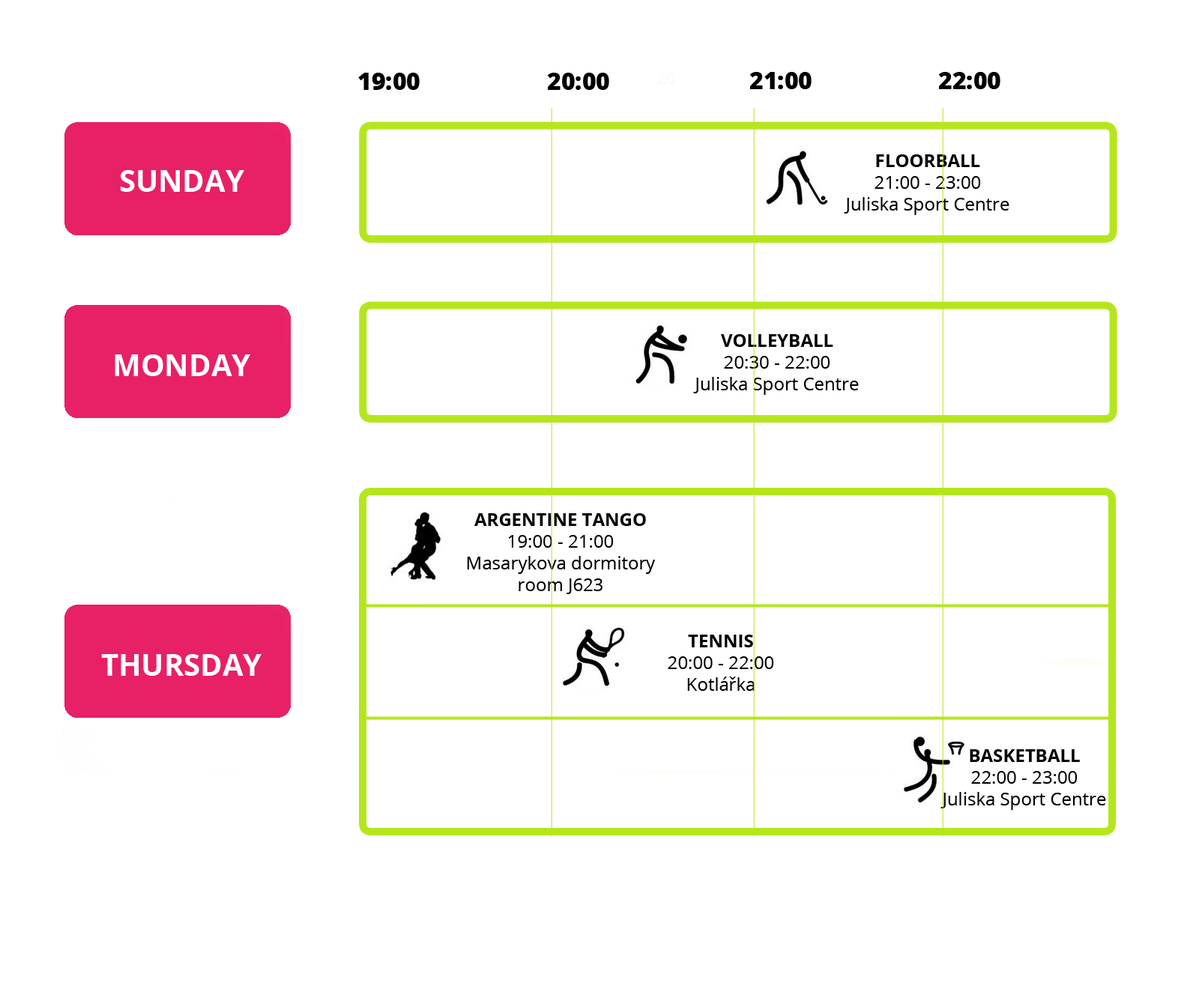
<style>
.page{position:relative;width:1202px;height:992px;background:#ffffff}
.page>*{position:absolute;margin:0}
.t1{font:24px "OpenSans-Extrabold";color:#000000}
.t2{font:18px "OpenSans";color:#000000}
.t3{font:18px "OpenSans-Bold";color:#000000}
.t4{font:30px "OpenSans-Bold";color:#ffffff}
</style>
<div class="page">
<p class="t1" style="left:358px;top:73px;width:62px;height:17px">19:00</p>
<p class="t1" style="left:547px;top:73px;width:62px;height:17px">20:00</p>
<p class="t1" style="left:749px;top:72px;width:63px;height:17px">21:00</p>
<p class="t1" style="left:938px;top:72px;width:62px;height:17px">22:00</p>
<p class="t2" style="left:844px;top:154px;width:165px;height:61px;text-align:center"><span class="t3">FLOORBALL<br></span>21:00 - 23:00<br>Juliska Sport Centre</p>
<p class="t4" style="left:120px;top:170px;width:124px;height:22px">SUNDAY</p>
<p class="t2" style="left:693px;top:334px;width:166px;height:61px;text-align:center"><span class="t3">VOLLEYBALL<br></span>20:30 - 22:00<br>Juliska Sport Centre</p>
<p class="t4" style="left:115px;top:354px;width:135px;height:22px">MONDAY</p>
<p class="t2" style="left:467px;top:513px;width:188px;height:81px;text-align:center"><span class="t3">ARGENTINE TANGO<br></span>19:00 - 21:00<br>Masarykova dormitory<br>room J623</p>
<p class="t2" style="left:668px;top:635px;width:106px;height:56px;text-align:center"><span class="t3">TENNIS<br></span>20:00 - 22:00<br>Kotlářka</p>
<p class="t4" style="left:101px;top:654px;width:161px;height:22px">THURSDAY</p>
<p class="t2" style="left:940px;top:749px;width:166px;height:61px;text-align:center"><span class="t3">BASKETBALL<br></span>22:00 - 23:00<br>Juliska Sport Centre</p>
</div>
